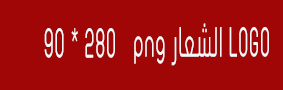
<style>
.page{position:relative;width:283px;height:90px;background:#a10606}
.page>*{position:absolute;margin:0}
.t1{font:41.4px "JFFlat-Regular";letter-spacing:0.016em;color:#f5f8f9;scale:0.47 1}
.t2{font:41.4px "JFFlat-Regular";letter-spacing:0.016em;color:#f5f8fa;scale:0.47 1}
</style>
<div class="page">
<p class="t1" style="left:44px;top:28px;width:71px;height:30px">280 * 90</p>
<p class="t2" style="left:134px;top:23px;width:135px;height:43px">LOGO الشعار png</p>
</div>
